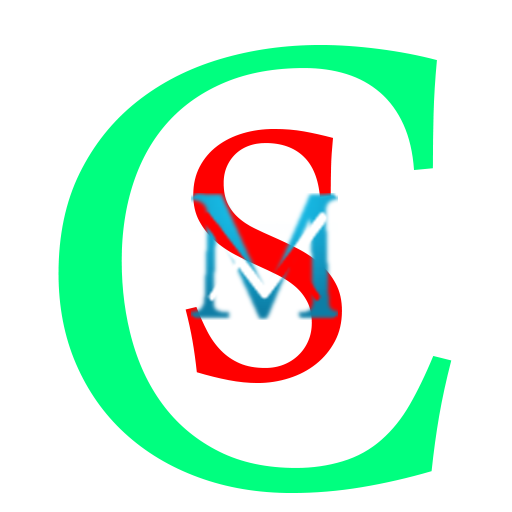
<style>
.page{position:relative;width:512px;height:512px;background:#ffffff}
.page>*{position:absolute;margin:0}
.t1{font:916.7px "ArabicTypesetting";color:#00ff7f}
.t2{font:520.8px "ArabicTypesetting";color:#ff0000}
</style>
<div class="page">
<p class="t1" style="left:58px;top:45px;width:394px;height:448px">C</p>
<p class="t2" style="left:185px;top:129px;width:157px;height:254px">S</p>
</div>
